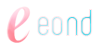
<style>
.page{position:relative;width:100px;height:50px;background:#ffffff}
.page>*{position:absolute;margin:0}
.t1{font:36px "071MKSD-01Medium"}
</style>
<div class="page">
<p class="t1" style="left:37px;top:9px;width:56px;height:28px">eond</p>
</div>
